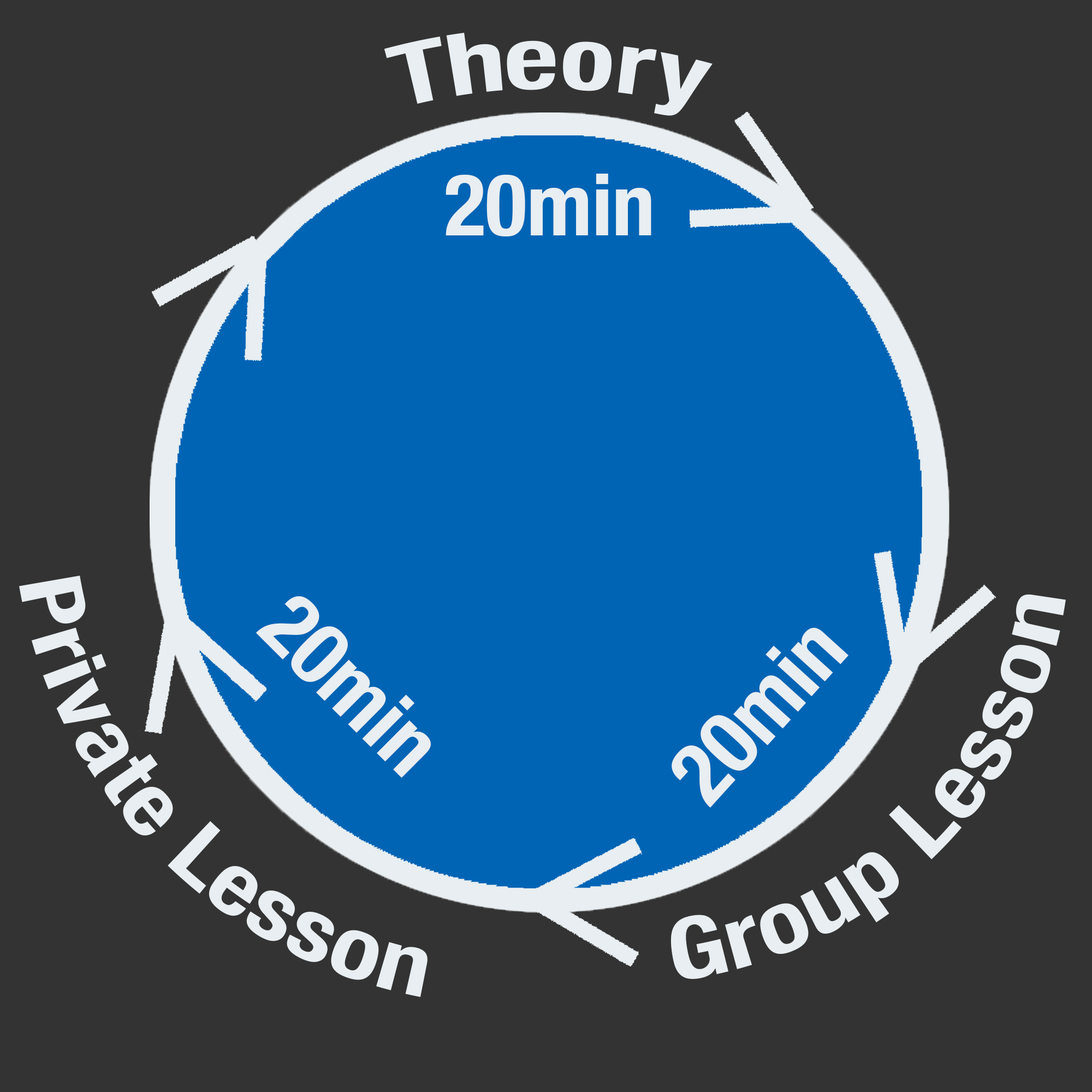
<style>
.page{position:relative;width:1092px;height:1092px;background:#333333}
.page>*{position:absolute;margin:0}
.t1{font:85.8px "HelveticaNeue-CondensedBold";color:#e8eef1}
.t2{font:85.7px "HelveticaNeue-CondensedBold";color:#e8eef1}
</style>
<div class="page">
<p class="t1" style="left:384px;top:33px;width:329px;height:83px">Theory</p>
<p class="t2" style="left:446px;top:174px;width:205px;height:62px">20min</p>
<p class="t2" style="left:19px;top:575px;width:409px;height:422px;rotate:46deg">Private Lesson</p>
<p class="t2" style="left:256px;top:596px;width:175px;height:182px;rotate:45deg">20min</p>
<p class="t2" style="left:670px;top:594px;width:396px;height:385px;rotate:-44deg">Group Lesson</p>
<p class="t2" style="left:672px;top:627px;width:176px;height:181px;rotate:-48deg">20min</p>
</div>
